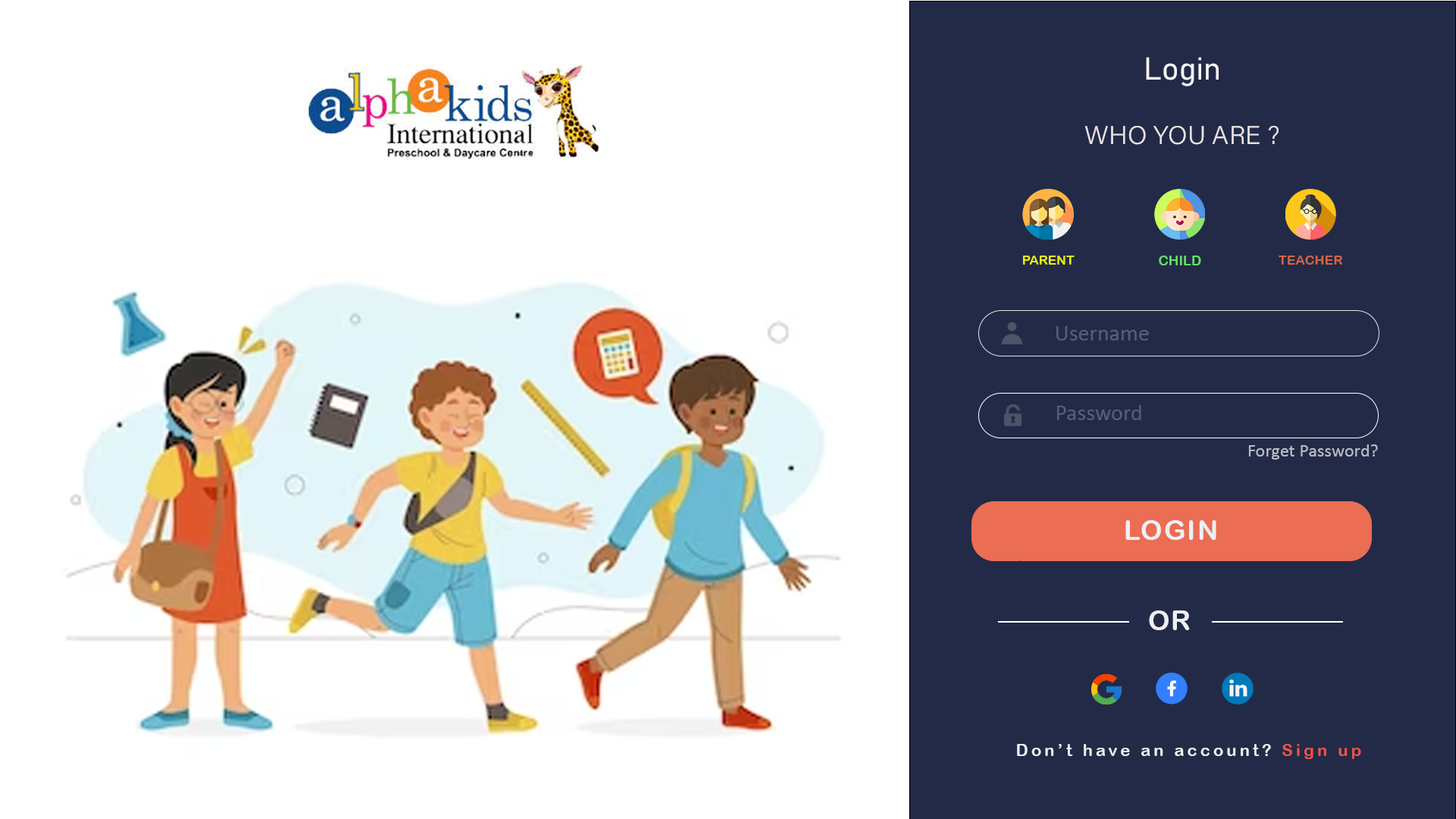
<style>
.page{position:relative;width:1456px;height:819px;background:#ffffff}
.page>*{position:absolute;margin:0}
.t1{font:31.3px "Bahnschrift-SemiLight";color:#f7f6f6}
.t2{font:25.8px "AcuminConcept-Light";color:#e8e2e1}
.t3{font:12.8px "ArialRoundedMTBold";color:#e5ed14}
.t4{font:13.7px "ArialRoundedMTBold";color:#61e261}
.t5{font:13.2px "ArialRoundedMTBold";color:#d26644}
.t6{font:22.7px "Calibri";color:#575e78}
.t7{font:18.4px "Calibri";color:#babbc1}
.t8{font:27.2px "ArialRoundedMTBold";letter-spacing:0.06em;color:#edeff4}
.t9{font:0.3px "Calibri";letter-spacing:0.2em}
.t10{font:16.4px "ArialRoundedMTBold";letter-spacing:0.2em;color:#edeff4}
.t11{font:16.4px "ArialRoundedMTBold";letter-spacing:0.2em;color:#ef5444}
</style>
<div class="page">
<p class="t1" style="left:1146px;top:57px;width:73px;height:29px">Login</p>
<p class="t2" style="left:1084px;top:125px;width:195px;height:20px">WHO YOU ARE ?</p>
<p class="t3" style="left:1023px;top:256px;width:52px;height:9px">PARENT</p>
<p class="t4" style="left:1159px;top:256px;width:42px;height:9px">CHILD</p>
<p class="t5" style="left:1279px;top:256px;width:63px;height:9px">TEACHER</p>
<p class="t6" style="left:1056px;top:326px;width:93px;height:14px">Username</p>
<p class="t6" style="left:1057px;top:405px;width:84px;height:15px">Password</p>
<p class="t7" style="left:1248px;top:444px;width:130px;height:16px">Forget Password?</p>
<p class="t8" style="left:1125px;top:520px;width:91px;height:20px">LOGIN</p>
<p class="t9" style="left:1018px;top:560px;width:3px;height:2px;text-align:center">Lorem Ipsum</p>
<p class="t8" style="left:1149px;top:610px;width:41px;height:20px">OR</p>
<p class="t10" style="left:1017px;top:744px;width:344px;height:15px">Don’t have an account? <span class="t11">Sign up</span></p>
</div>
